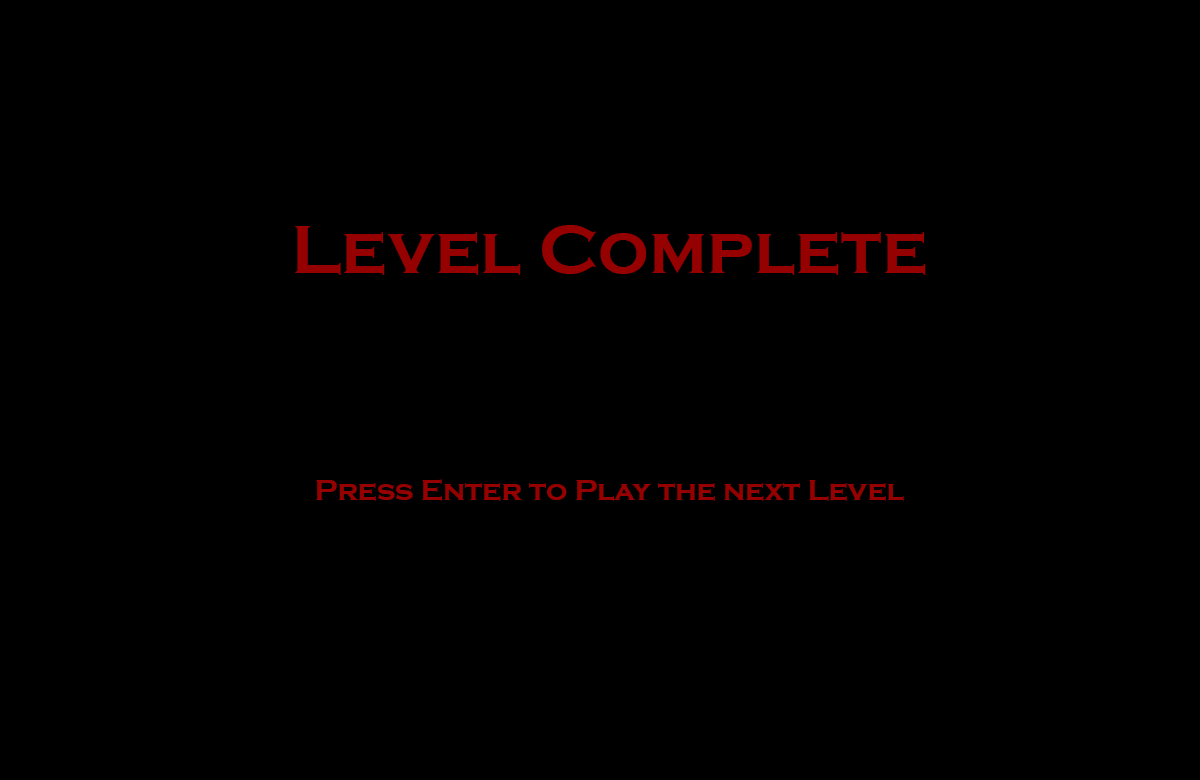
<style>
.page{position:relative;width:1200px;height:780px;background:#000000}
.page>*{position:absolute;margin:0}
.t1{font:71.1px "CopperplateGothic-Bold";color:#950000}
.t2{font:29.6px "CopperplateGothic-Bold";color:#950000}
</style>
<div class="page">
<p class="t1" style="left:295px;top:225px;width:631px;height:50px">Level Complete</p>
<p class="t2" style="left:316px;top:479px;width:588px;height:22px">Press Enter to Play the next Level</p>
</div>
